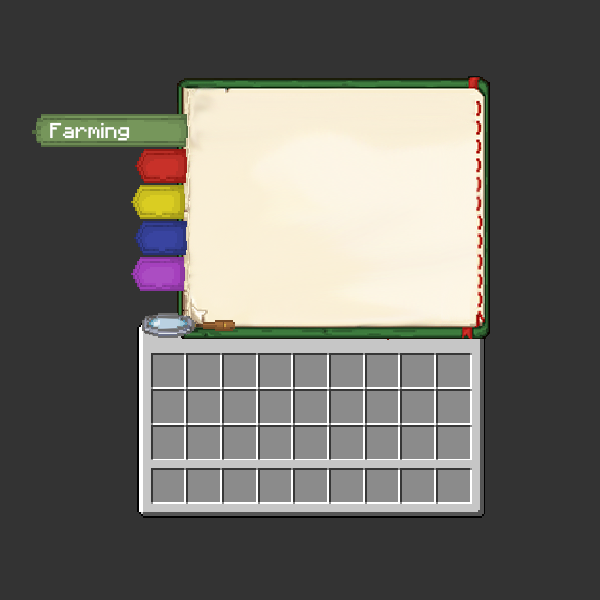
<style>
.page{position:relative;width:600px;height:600px;background:#333333}
.page>*{position:absolute;margin:0}
.t1{font:17px "Minecraft";color:#ffffff}
</style>
<div class="page">
<p class="t1" style="left:50px;top:122px;width:80px;height:19px">Farming</p>
</div>
